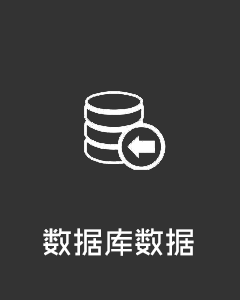
<style>
.page{position:relative;width:240px;height:300px;background:#333333}
.page>*{position:absolute;margin:0}
.t1{font:30px "RTWSShangGoG0v1-Regular";letter-spacing:0.022em;color:#ffffff}
</style>
<div class="page">
<p class="t1" style="left:43px;top:228px;width:151px;height:28px">数据库数据</p>
</div>
